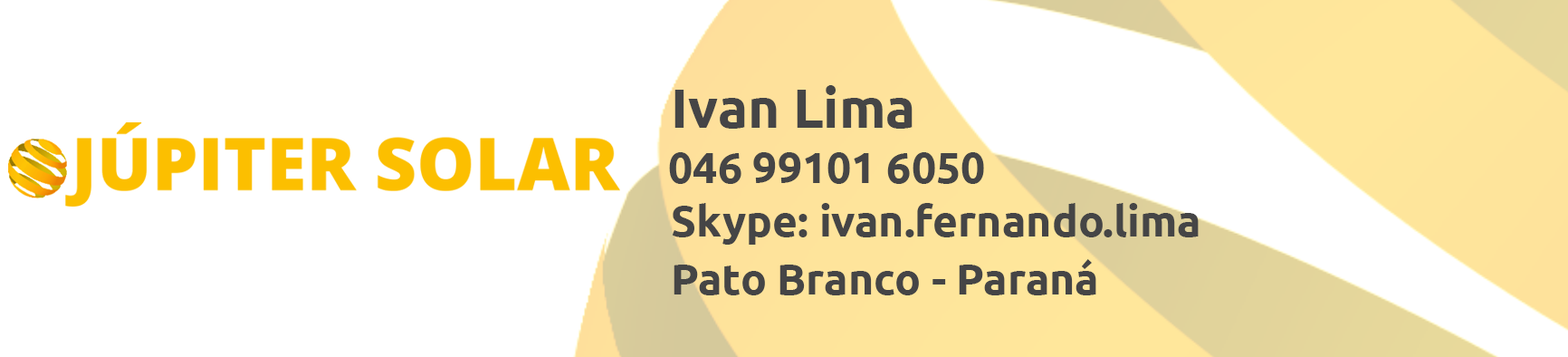
<style>
.page{position:relative;width:1568px;height:357px;background:#ffffff}
.page>*{position:absolute;margin:0}
.t1{font:54.3px "Ubuntu-Bold";color:#454546}
.t2{font:43.5px "Ubuntu-Bold";color:#454546}
</style>
<div class="page">
<p class="t1" style="left:674px;top:85px;width:239px;height:44px">Ivan Lima</p>
<p class="t2" style="left:669px;top:152px;width:315px;height:32px">046 99101 6050</p>
<p class="t2" style="left:672px;top:203px;width:527px;height:41px">Skype: ivan.fernando.lima</p>
<p class="t2" style="left:674px;top:259px;width:422px;height:36px">Pato Branco - Paraná</p>
</div>
